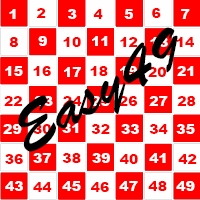
<style>
.page{position:relative;width:200px;height:200px;background:#fefefe}
.page>*{position:absolute;margin:0}
.t1{font:14px "Arial-Black";color:#fcfafa}
.t2{font:14px "Arial-Black";color:#fe0000}
.t3{font:58.6px "BrushScriptStd";color:#010101}
.t4{font:14px "Arial-Black";color:#fefefe}
.t5{font:14px "Arial-Black"}
</style>
<div class="page">
<p class="t1" style="left:9px;top:9px;width:7px;height:10px">1</p>
<p class="t2" style="left:36px;top:8px;width:10px;height:10px">2</p>
<p class="t1" style="left:68px;top:9px;width:9px;height:10px">3</p>
<p class="t2" style="left:93px;top:9px;width:10px;height:10px">4</p>
<p class="t1" style="left:124px;top:9px;width:9px;height:10px">5</p>
<p class="t2" style="left:152px;top:8px;width:9px;height:10px">6</p>
<p class="t1" style="left:181px;top:9px;width:9px;height:10px">7</p>
<p class="t3" style="left:18px;top:27px;width:160px;height:125px;rotate:-29deg">Easy49</p>
<p class="t2" style="left:9px;top:37px;width:9px;height:10px">8</p>
<p class="t4" style="left:38px;top:36px;width:9px;height:10px">9</p>
<p class="t2" style="left:63px;top:37px;width:18px;height:10px">10</p>
<p class="t4" style="left:92px;top:36px;width:16px;height:10px">11</p>
<p class="t2" style="left:120px;top:37px;width:18px;height:10px">12</p>
<p class="t5" style="left:150px;top:37px;width:18px;height:10px">13</p>
<p class="t2" style="left:176px;top:37px;width:18px;height:10px">14</p>
<p class="t4" style="left:5px;top:66px;width:18px;height:10px">15</p>
<p class="t2" style="left:33px;top:66px;width:18px;height:10px">16</p>
<p class="t4" style="left:64px;top:67px;width:17px;height:10px">17</p>
<p class="t2" style="left:90px;top:66px;width:18px;height:10px">18</p>
<p class="t5" style="left:120px;top:66px;width:17px;height:10px">19</p>
<p class="t2" style="left:148px;top:67px;width:18px;height:10px">20</p>
<p class="t4" style="left:177px;top:66px;width:17px;height:10px">21</p>
<p class="t2" style="left:4px;top:96px;width:18px;height:10px">22</p>
<p class="t5" style="left:34px;top:96px;width:19px;height:10px">23</p>
<p class="t2" style="left:63px;top:96px;width:19px;height:10px">24</p>
<p class="t5" style="left:91px;top:96px;width:19px;height:10px">25</p>
<p class="t2" style="left:119px;top:96px;width:19px;height:10px">26</p>
<p class="t4" style="left:149px;top:96px;width:19px;height:10px">27</p>
<p class="t2" style="left:177px;top:96px;width:19px;height:10px">28</p>
<p class="t4" style="left:3px;top:124px;width:19px;height:10px">29</p>
<p class="t2" style="left:33px;top:124px;width:18px;height:10px">30</p>
<p class="t4" style="left:62px;top:123px;width:17px;height:10px">31</p>
<p class="t2" style="left:91px;top:124px;width:19px;height:10px">32</p>
<p class="t4" style="left:121px;top:124px;width:18px;height:10px">33</p>
<p class="t2" style="left:149px;top:124px;width:19px;height:10px">34</p>
<p class="t4" style="left:176px;top:124px;width:19px;height:10px">35</p>
<p class="t2" style="left:5px;top:154px;width:18px;height:10px">36</p>
<p class="t4" style="left:33px;top:153px;width:18px;height:10px">37</p>
<p class="t2" style="left:62px;top:153px;width:19px;height:10px">38</p>
<p class="t4" style="left:92px;top:153px;width:18px;height:10px">39</p>
<p class="t2" style="left:120px;top:154px;width:18px;height:10px">40</p>
<p class="t4" style="left:149px;top:153px;width:17px;height:10px">41</p>
<p class="t2" style="left:178px;top:154px;width:19px;height:10px">42</p>
<p class="t4" style="left:5px;top:181px;width:18px;height:10px">43</p>
<p class="t2" style="left:33px;top:182px;width:19px;height:10px">44</p>
<p class="t4" style="left:62px;top:181px;width:19px;height:10px">45</p>
<p class="t2" style="left:91px;top:182px;width:18px;height:10px">46</p>
<p class="t4" style="left:119px;top:181px;width:19px;height:10px">47</p>
<p class="t2" style="left:148px;top:181px;width:19px;height:10px">48</p>
<p class="t4" style="left:176px;top:181px;width:19px;height:10px">49</p>
</div>
